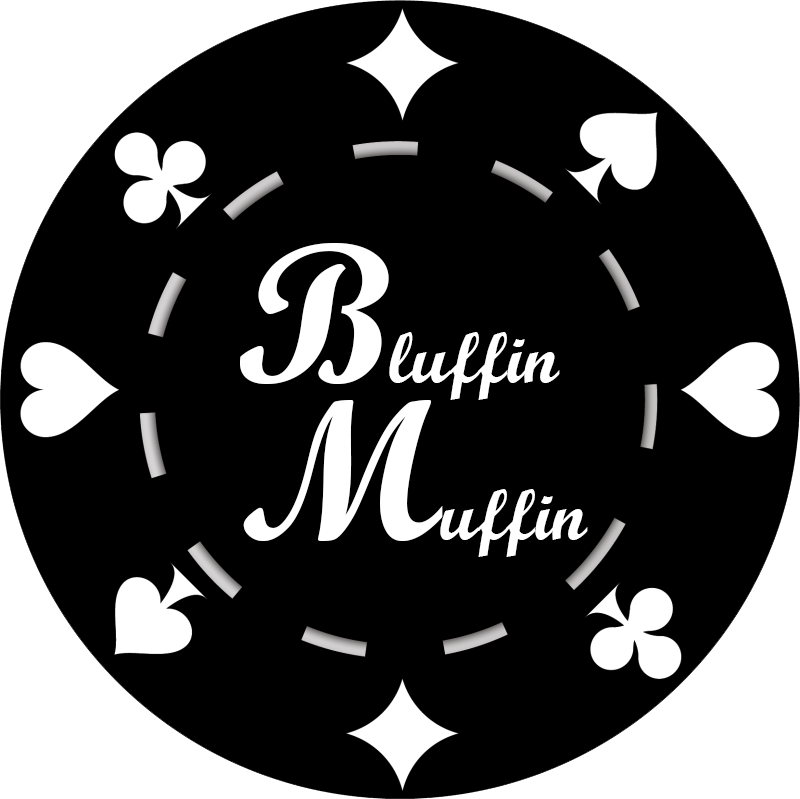
<style>
.page{position:relative;width:800px;height:799px;background:#000000}
.page>*{position:absolute;margin:0}
.t1{font:72px "ScriptMTBold";color:#ffffff}
.t2{font:200px "ScriptMTBold";color:#ffffff}
</style>
<div class="page">
<p class="t1" style="left:240px;top:243px;width:320px;height:157px"><span class="t2">B</span>luffin</p>
<p class="t1" style="left:243px;top:400px;width:345px;height:157px"><span class="t2">M</span>uffin</p>
</div>
